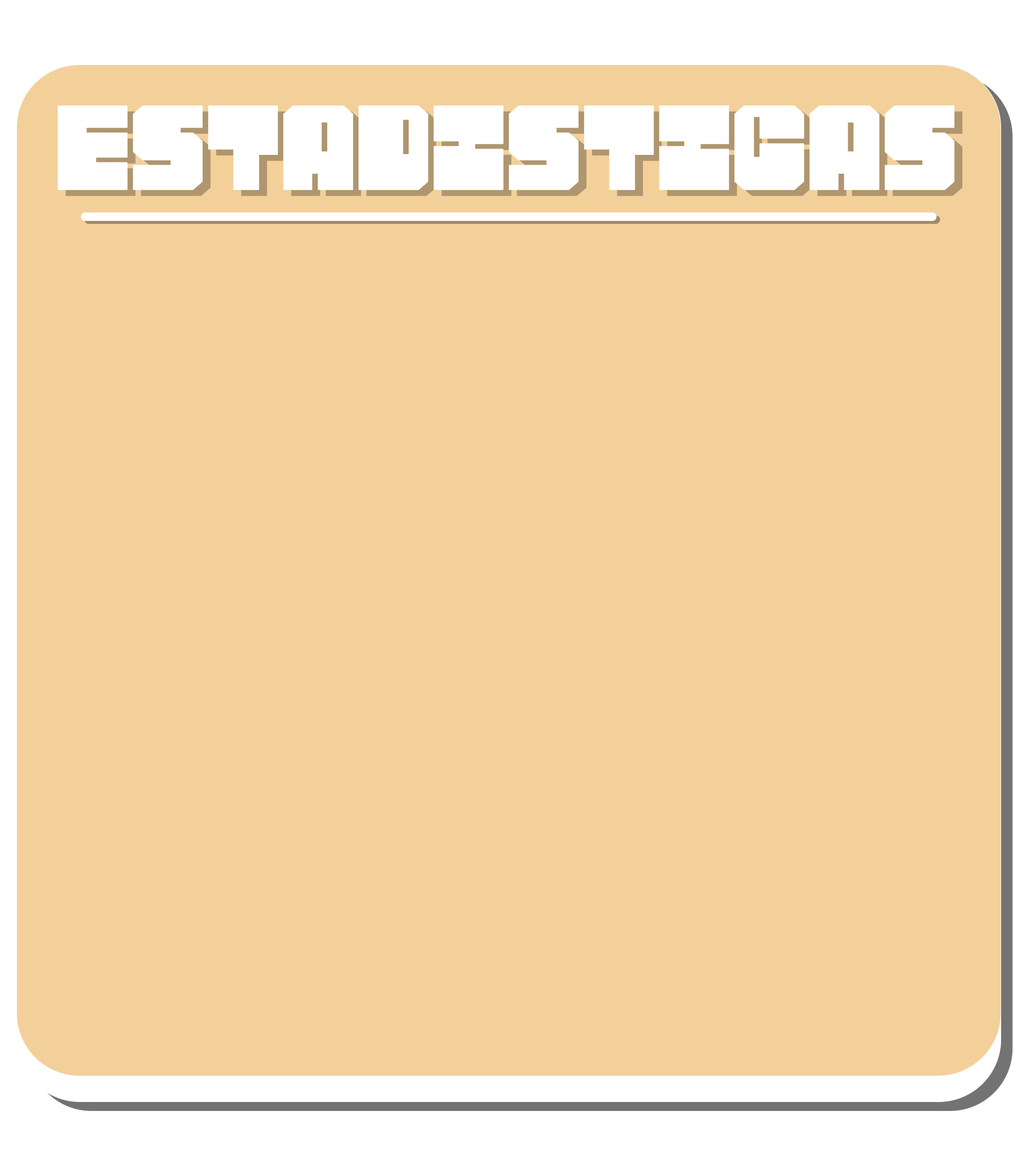
<style>
.page{position:relative;width:1017px;height:1173px;background:#f3d099}
.page>*{position:absolute;margin:0}
.t1{font:83.8px "Fruit-Punch";color:#ffffff;font-weight:bold;scale:1.16 1}
</style>
<div class="page">
<p class="t1" style="left:58px;top:105px;width:896px;height:85px">ESTADISTICAS</p>
</div>
